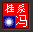
<style>
.page{position:relative;width:33px;height:32px;background:#f20000}
.page>*{position:absolute;margin:0}
.t1{font:10.4px "SimSun";color:#ffffff}
.t2{font:11.7px "SimSun";color:#ffffff}
</style>
<div class="page">
<p class="t1" style="left:5px;top:4px;width:20px;height:9px">桂系</p>
<p class="t2" style="left:16px;top:15px;width:11px;height:12px">冯</p>
</div>
